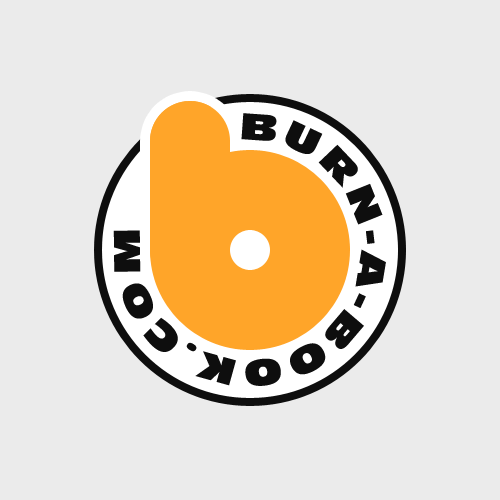
<style>
.page{position:relative;width:500px;height:500px;background:#ebebeb}
.page>*{position:absolute;margin:0}
.t1{font:35px "Incised901BT-Nord";letter-spacing:0.115em;color:#0e0e0e;text-transform:uppercase}
</style>
<div class="page">
<p class="t1" style="left:113px;top:113px;width:273px;height:273px;rotate:-6deg">burn-a-book.com</p>
</div>
